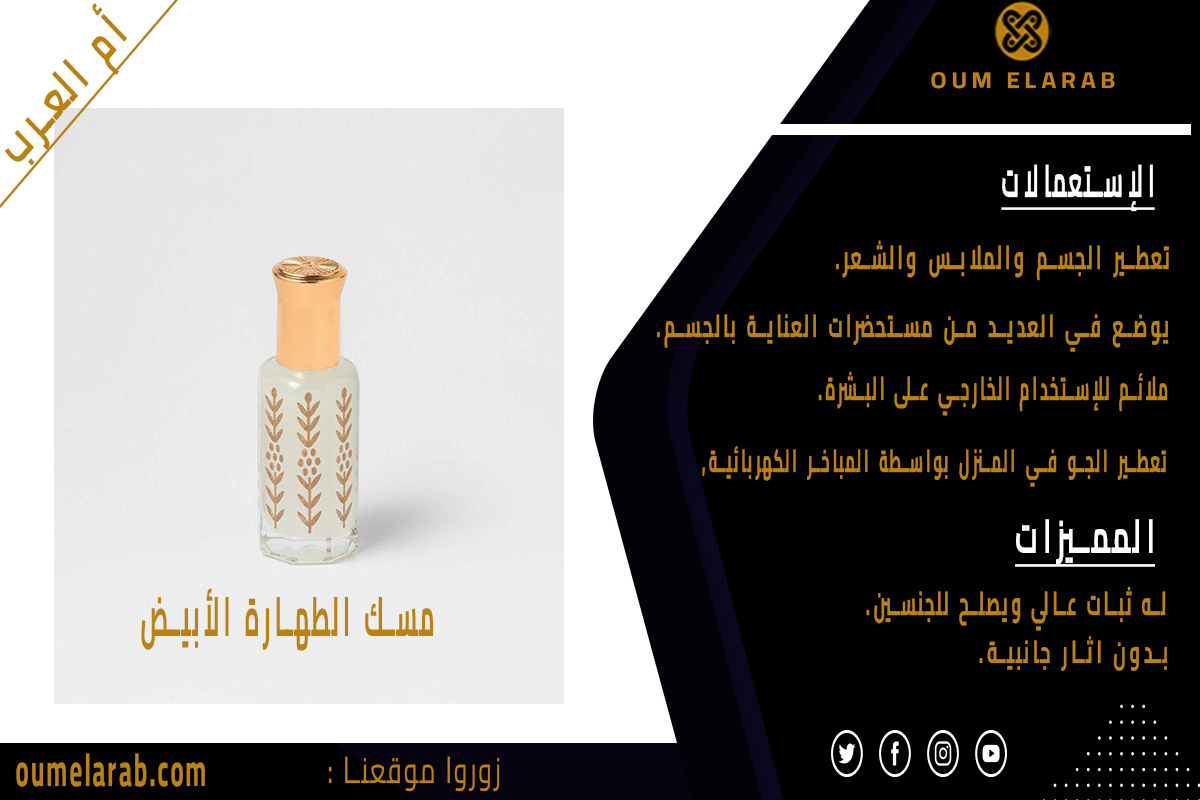
<style>
.page{position:relative;width:1200px;height:800px;background:#000000}
.page>*{position:absolute;margin:0}
.t1{font:22.8px "Cairo-Bold";letter-spacing:0.2em;color:#bb8210;font-weight:bold;font-style:italic;scale:1.05 1}
.t2{font:45.4px "Cairo-Bold";letter-spacing:0.2em;color:#fefefe;font-weight:bold;font-style:italic;text-decoration:underline;scale:0.45 1}
.t3{font:33.3px "Cairo-Bold";letter-spacing:0.2em;color:#bb8210;font-weight:bold;font-style:italic;scale:0.5 1}
.t4{font:31.7px "Cairo-Bold";letter-spacing:0.2em;color:#bb8210;font-weight:bold;font-style:italic;scale:0.53 1}
.t5{font:33.2px "Cairo-Bold";letter-spacing:0.2em;color:#bb8210;font-weight:bold;font-style:italic;scale:0.46 1}
.t6{font:31.7px "Cairo-Bold";letter-spacing:0.2em;color:#bb8210;font-weight:bold;font-style:italic;scale:0.46 1}
.t7{font:47.8px "Cairo-Bold";letter-spacing:0.2em;color:#ffffff;font-weight:bold;font-style:italic;text-decoration:underline;scale:0.56 1}
.t8{font:55px "Cairo-Bold";letter-spacing:0.2em;color:#bb8210;font-weight:bold;font-style:italic;scale:0.41 1}
.t9{font:33.2px "Cairo-Bold";letter-spacing:0.2em;color:#bb8210;font-weight:bold;font-style:italic;scale:0.49 1}
.t10{font:31.7px "Cairo-Bold";letter-spacing:0.2em;color:#bb8210;font-weight:bold;font-style:italic;scale:0.57 1}
.t11{font:45.9px "Cairo-Bold";letter-spacing:0.1em;color:#bb8210;font-weight:bold;scale:0.53 1}
.t12{font:36.7px "Cairo-Regular";letter-spacing:0.1em;color:#bb8210;font-weight:bold;scale:0.65 1}
</style>
<div class="page">
<p class="t1" style="left:931px;top:72px;width:184px;height:17px">OUM ELARAB</p>
<p class="t2" style="left:1001px;top:164px;width:154px;height:48px">الإستعمالات</p>
<p class="t3" style="left:836px;top:240px;width:333px;height:41px">تعطير الجسم والملابس والشعر.</p>
<p class="t4" style="left:657px;top:314px;width:512px;height:38px">يوضع في العديد من مستحضرات العناية بالجسم.</p>
<p class="t5" style="left:818px;top:371px;width:350px;height:45px">ملائم للإستخدام الخارجي على البشرة.</p>
<p class="t6" style="left:702px;top:446px;width:464px;height:41px">تعطير الجو في المنزل بواسطة المباخر الكهربائية,</p>
<p class="t7" style="left:1015px;top:519px;width:140px;height:48px">المميزات</p>
<p class="t8" style="left:141px;top:588px;width:293px;height:63px">مسك الطهارة الأبيض</p>
<p class="t9" style="left:866px;top:586px;width:300px;height:45px">له ثبات عالي ويصلح للجنسين.</p>
<p class="t10" style="left:979px;top:636px;width:188px;height:35px">بدون اثار جانبية.</p>
<p class="t11" style="left:16px;top:753px;width:189px;height:34px">oumelarab.com</p>
<p class="t12" style="left:328px;top:756px;width:172px;height:36px">زوروا موقعنا :</p>
</div>
